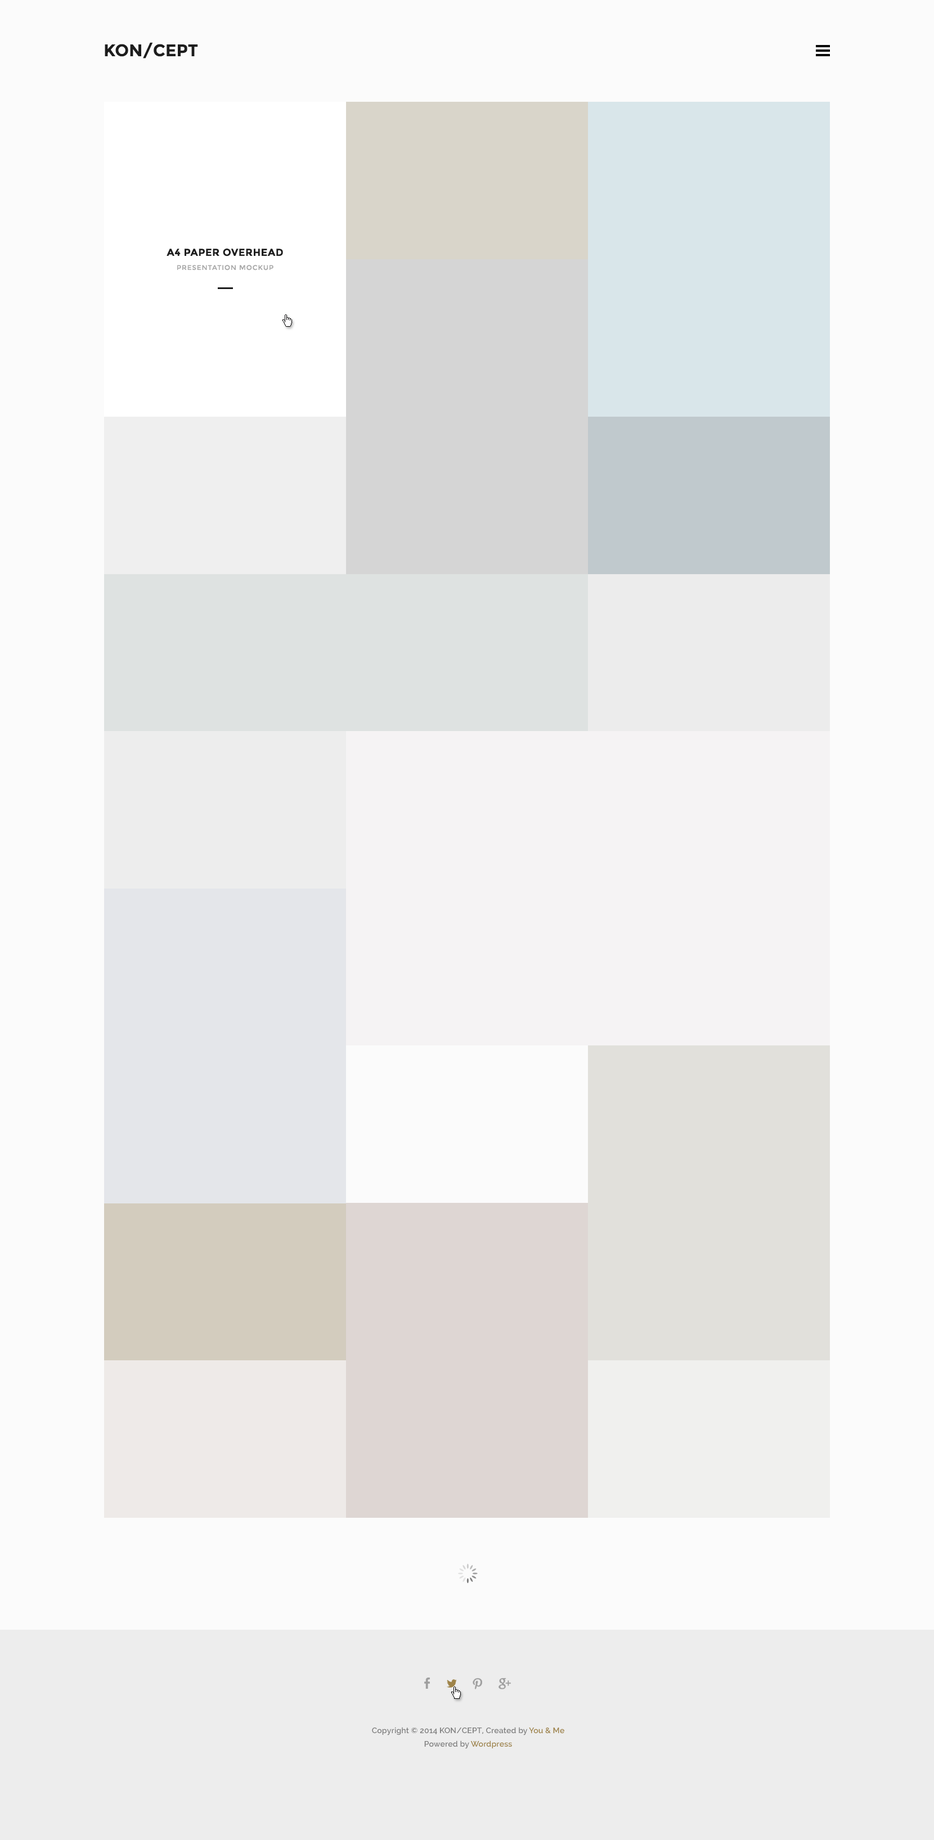
<style>
.page{position:relative;width:934px;height:1840px;background:#fbfbfb}
.page>*{position:absolute;margin:0}
.t1{font:16.9px "Montserrat-Bold";color:#1d1d1d;text-transform:uppercase}
.t2{font:10.1px "Montserrat-Bold";letter-spacing:0.025em;color:#1d1d1d;text-transform:uppercase}
.t3{font:6.8px "Montserrat-Regular";letter-spacing:0.075em;color:#a8a8a8;text-transform:uppercase}
.t4{font:7.9px/13.5px "Raleway-SemiBold";letter-spacing:0.01em;color:#7d7d7d}
.t5{font:7.9px/13.5px "Raleway-SemiBold";letter-spacing:0.01em;color:#9e8348}
</style>
<div class="page">
<p class="t1" style="left:105px;top:42px;width:93px;height:16px">kON/CEPT</p>
<p class="t2" style="left:166px;top:249px;width:117px;height:7px">A4 Paper overhead</p>
<p class="t3" style="left:177px;top:265px;width:96px;height:6px">presentation mockup</p>
<p class="t4" style="left:372px;top:1727px;width:192px;height:22px;text-align:center">Copyright © 2014 KON/CEPT, Created by <span class="t5">You &amp; Me<br></span>Powered by <span class="t5">Wordpress</span></p>
</div>
